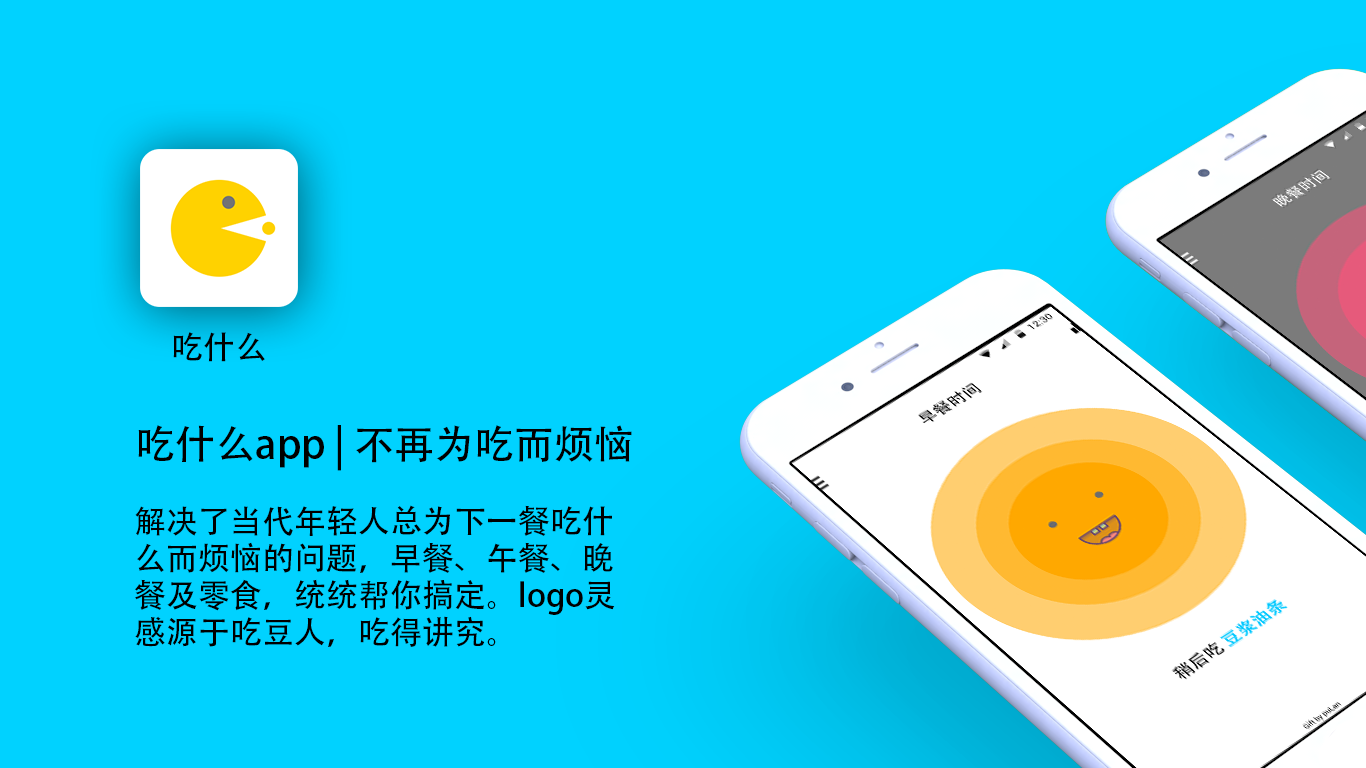
<style>
.page{position:relative;width:1366px;height:768px;background:#00d2ff}
.page>*{position:absolute;margin:0}
.t1{font:32px "AdobeHeitiStd-Regular";color:#000000}
.t2{font:40px "AdobeHeitiStd-Regular";color:#000000}
.t3{font:32px/37px "AdobeHeitiStd-Regular";color:#000000}
</style>
<div class="page">
<p class="t1" style="left:173px;top:332px;width:92px;height:30px">吃什么</p>
<p class="t2" style="left:138px;top:425px;width:494px;height:46px">吃什么app | 不再为吃而烦恼</p>
<p class="t3" style="left:135px;top:505px;width:480px;height:142px">解决了当代年轻人总为下一餐吃什<br>么而烦恼的问题，早餐、午餐、晚<br>餐及零食，统统帮你搞定。logo灵<br>感源于吃豆人，吃得讲究。</p>
</div>
